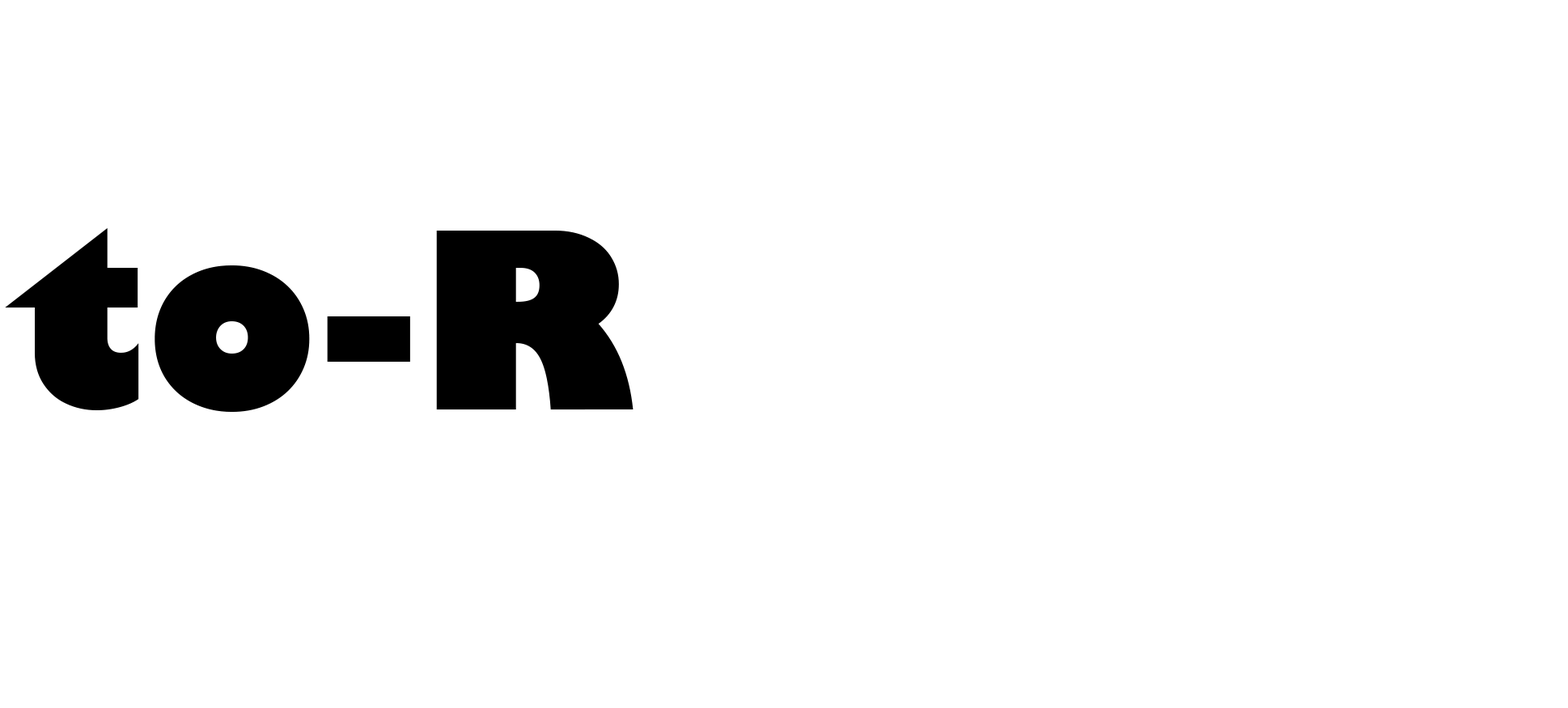
<style>
.page{position:relative;width:1568px;height:708px;background:#ffffff}
.page>*{position:absolute;margin:0}
.t1{font:240.5px "GillSans-UltraBold";color:#000000}
</style>
<div class="page">
<p class="t1" style="left:5px;top:228px;width:629px;height:184px">to-R</p>
</div>
